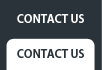
<style>
.page{position:relative;width:102px;height:70px;background:#2a333a}
.page>*{position:absolute;margin:0}
.t1{font:12px "MyriadPro-Semibold";color:#ffffff}
.t2{font:12px "MyriadPro-Semibold";color:#2a333a}
</style>
<div class="page">
<p class="t1" style="left:17px;top:14px;width:67px;height:9px">CONTACT US</p>
<p class="t2" style="left:17px;top:49px;width:67px;height:9px">CONTACT US</p>
</div>
